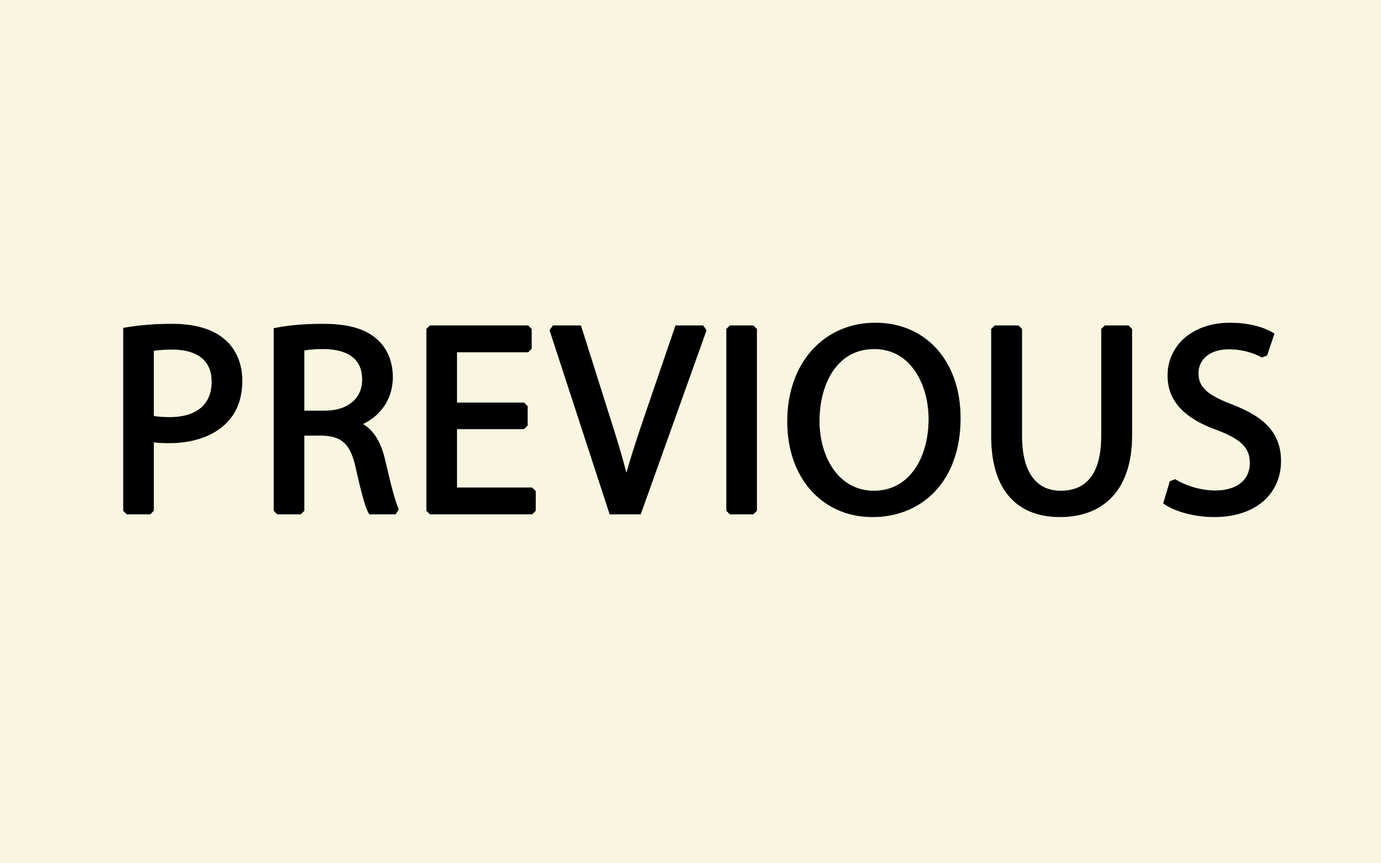
<style>
.page{position:relative;width:1381px;height:863px;background:#f8f6e0}
.page>*{position:absolute;margin:0}
.t1{font:269.8px "MyriadPro-Regular";color:#000000;font-weight:bold}
</style>
<div class="page">
<p class="t1" style="left:123px;top:323px;width:1158px;height:194px">PREVIOUS</p>
</div>
